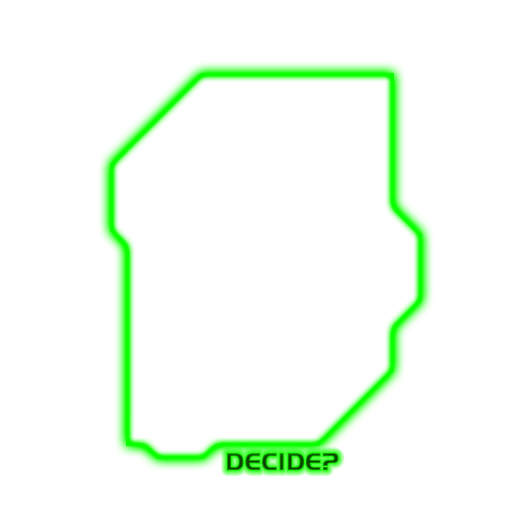
<style>
.page{position:relative;width:520px;height:520px;background:#ffffff}
.page>*{position:absolute;margin:0}
.t1{font:23.7px "HandelGothicBT-Regular";letter-spacing:0.01em;font-weight:bold}
</style>
<div class="page">
<p class="t1" style="left:227px;top:453px;width:112px;height:18px">DECIDE?</p>
</div>
